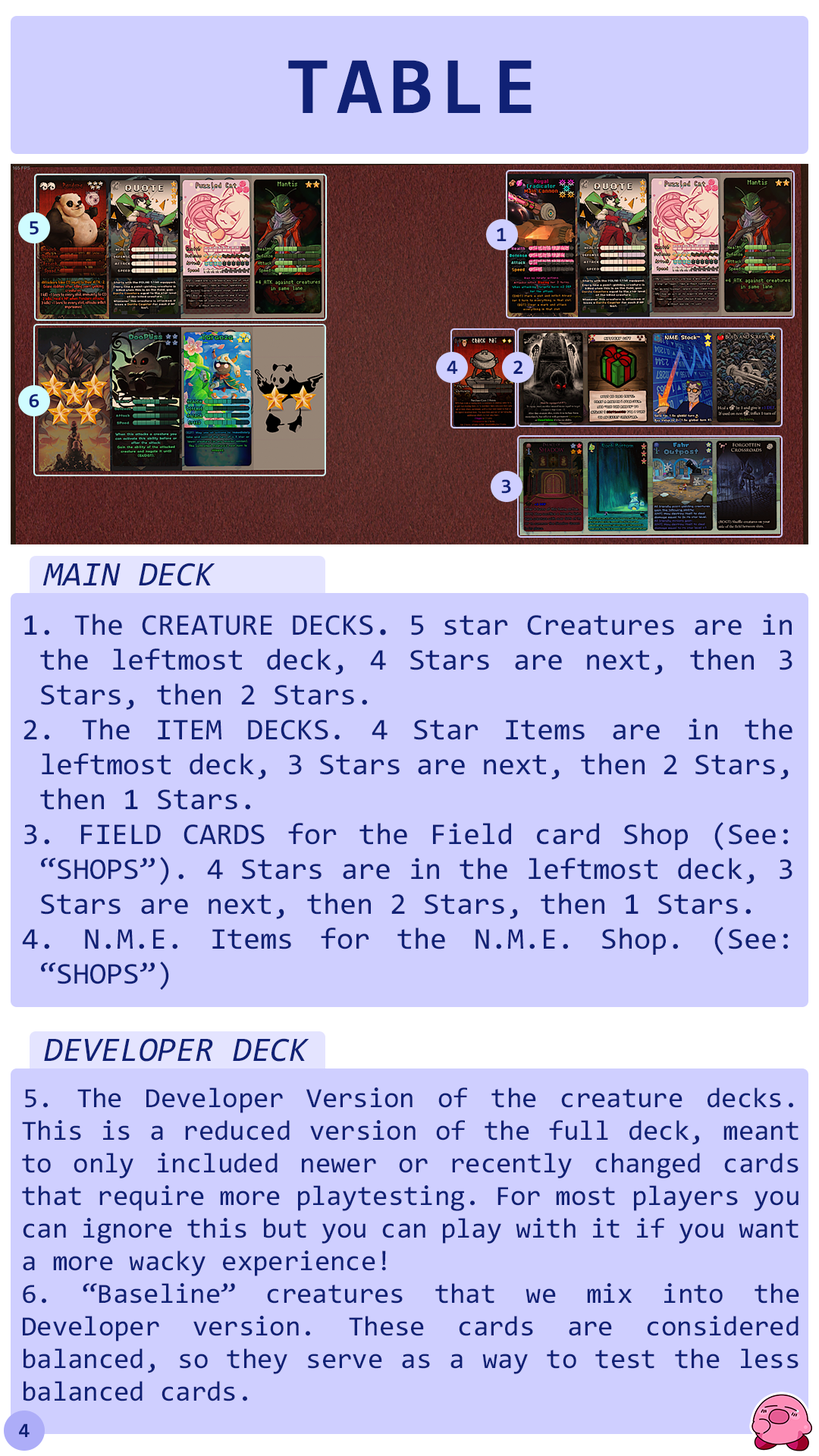
<style>
.page{position:relative;width:819px;height:1456px;background:#cfcfff}
.page>*{position:absolute;margin:0}
.t1{font:82.2px "Consolas-Bold";letter-spacing:0.08em;color:#102175}
.t2{font:20.5px "Consolas-Bold";color:#102175}
.t3{font:20.6px "Consolas-Bold";color:#102175}
.t4{font:34.3px "Consolas-Italic";color:#102175}
.t5{font:30.3px/34.9px "Consolas";color:#102175}
.t6{font:30.3px/34.9px "Consolas-Bold";color:#102175}
.t7{font:30.3px/34.9px "Consolas-Italic";color:#102175}
.t8{font:28.1px/32.6px "Consolas";color:#102175}
.t9{font:20.5px "Consolas-Bold";letter-spacing:-0.06em;color:#102175}
</style>
<div class="page">
<p class="t1" style="left:288px;top:60px;width:244px;height:53px">TABLE</p>
<p class="t2" style="left:30px;top:221px;width:9px;height:14px">5</p>
<p class="t2" style="left:497px;top:227px;width:10px;height:14px">1</p>
<p class="t2" style="left:447px;top:360px;width:11px;height:14px">4</p>
<p class="t3" style="left:513px;top:360px;width:9px;height:14px">2</p>
<p class="t2" style="left:29px;top:394px;width:10px;height:14px">6</p>
<p class="t2" style="left:501px;top:479px;width:10px;height:15px">3</p>
<p class="t4" style="left:43px;top:563px;width:172px;height:23px">MAIN DECK</p>
<p class="t5" style="left:22px;top:613px;width:770px;height:377px;text-align:justify">The CREATURE DECKS<span class="t6">. </span>5 star Creatures are in the leftmost deck, 4 Stars are next, then 3 Stars, then 2 Stars.<br> The ITEM DECKS<span class="t7">. </span>4 Star Items are in the leftmost deck, 3 Stars are next, then 2 Stars, then 1 Stars.<br> FIELD CARDS for the Field card Shop (See: “SHOPS”). 4 Stars are in the leftmost deck, 3 Stars are next, then 2 Stars, then 1 Stars.<br> N.M.E. Items for the N.M.E. Shop. (See: “SHOPS”)</p>
<p class="t4" style="left:44px;top:1038px;width:265px;height:24px">DEVELOPER DECK</p>
<p class="t8" style="left:22px;top:1087px;width:777px;height:314px;text-align:justify">5. The Developer Version of the creature decks. This is a reduced version of the full deck, meant to only included newer or recently changed cards that require more playtesting. For most players you can ignore this but you can play with it if you want a more wacky experience!<br>6. “Baseline” creatures that we mix into the Developer version. These cards are considered balanced, so they serve as a way to test the less balanced cards.</p>
<p class="t9" style="left:19px;top:1423px;width:11px;height:14px">4</p>
</div>
